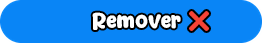
<style>
.page{position:relative;width:262px;height:43px;background:#0985f6}
.page>*{position:absolute;margin:0}
.t1{font:20px "Purple-Smile";color:#ffffff}
</style>
<div class="page">
<p class="t1" style="left:92px;top:12px;width:89px;height:18px">Remover</p>
</div>
